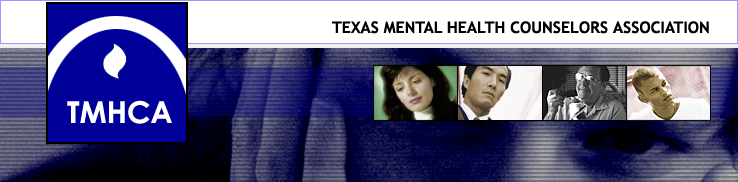
<style>
.page{position:relative;width:738px;height:182px}
.page>*{position:absolute;margin:0}
.t1{font:16px "TrebuchetMS-Bold";color:#000000}
.t2{font:30px "CenturyGothic-Bold";color:#ffffff}
</style>
<div class="page">
<p class="t1" style="left:332px;top:21px;width:377px;height:13px">TEXAS MENTAL HEALTH COUNSELORS ASSOCIATION</p>
<p class="t2" style="left:67px;top:100px;width:105px;height:24px">TMHCA</p>
</div>
